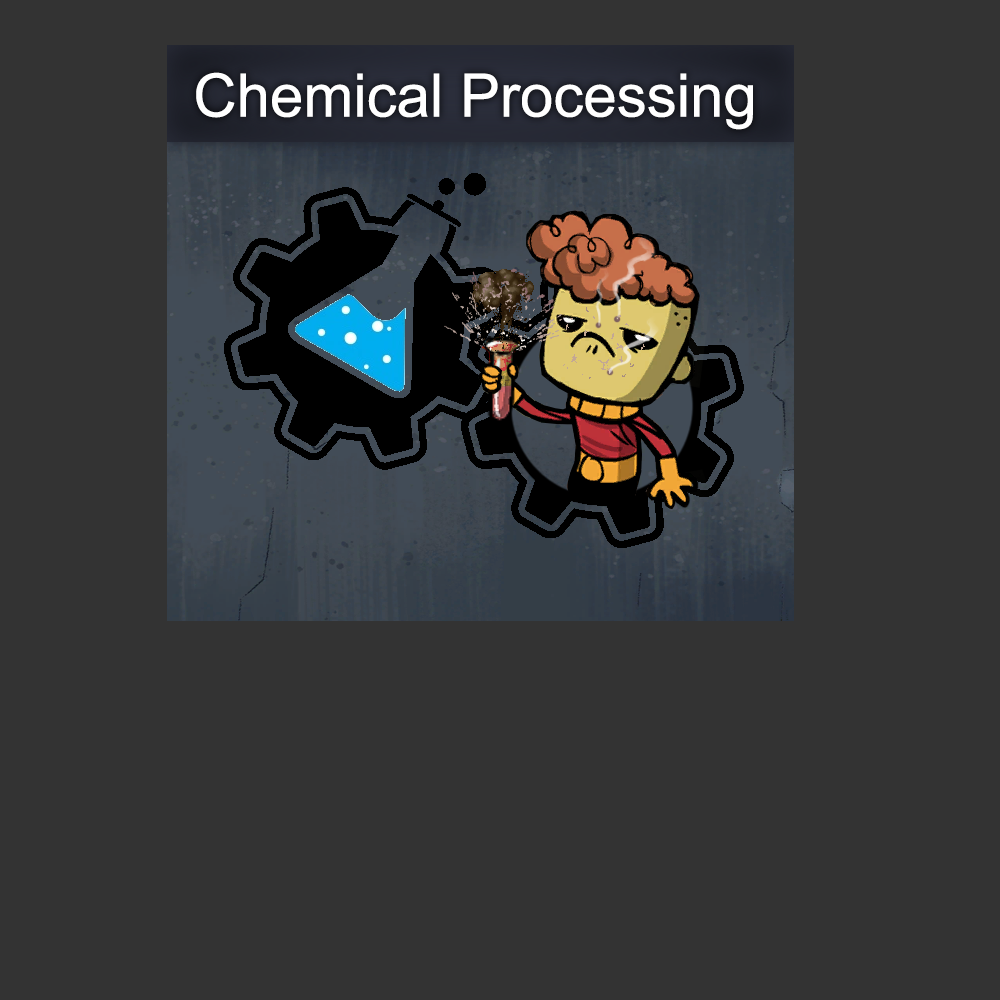
<style>
.page{position:relative;width:1000px;height:1000px;background:#333333}
.page>*{position:absolute;margin:0}
.t1{font:60px "ArialMT";color:#ffffff}
</style>
<div class="page">
<p class="t1" style="left:196px;top:72px;width:557px;height:58px">Chemical Processing</p>
</div>
